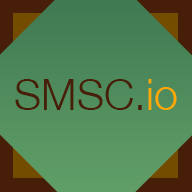
<style>
.page{position:relative;width:192px;height:192px}
.page>*{position:absolute;margin:0}
.t1{font:43.5px "HelveticaNeue-Light";color:#471e08}
.t2{font:43.5px "HelveticaNeue-Light";color:#ffa800}
</style>
<div class="page">
<p class="t1" style="left:15px;top:79px;width:162px;height:31px">SMSC.<span class="t2">io</span></p>
</div>
